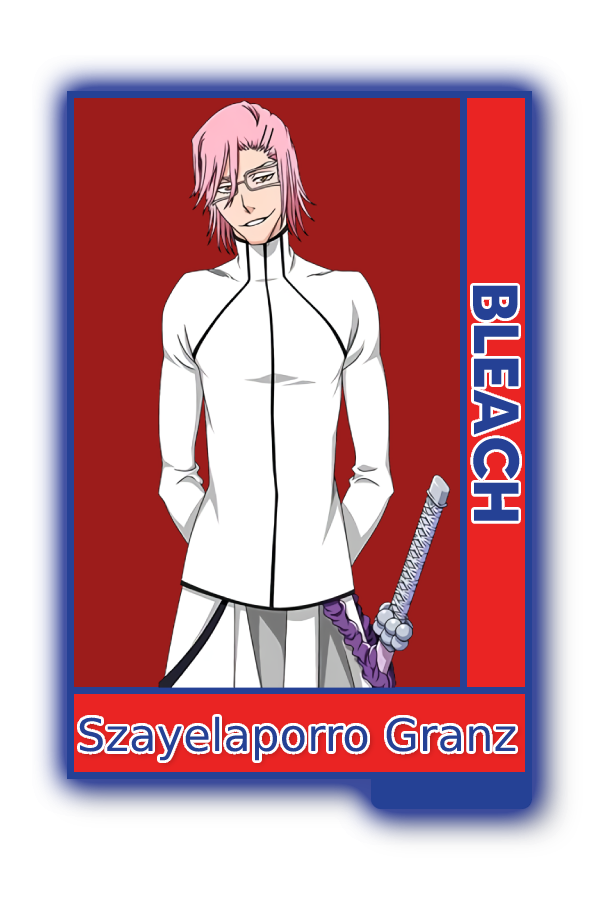
<style>
.page{position:relative;width:600px;height:900px;background:#ffffff}
.page>*{position:absolute;margin:0}
.t1{font:63.6px "MADETOMMY-Bold";color:#254195}
.t2{font:45px "CoolveticaRg-Regular";color:#254195}
</style>
<div class="page">
<p class="t1" style="left:473px;top:285px;width:47px;height:236px;rotate:90deg">BLEACH</p>
<p class="t2" style="left:79px;top:716px;width:437px;height:45px">Szayelaporro Granz</p>
</div>
